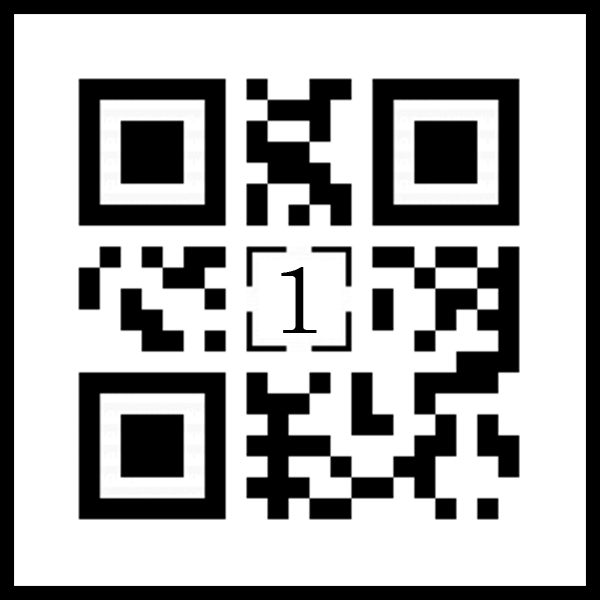
<style>
.page{position:relative;width:600px;height:600px;background:#ffffff}
.page>*{position:absolute;margin:0}
.t1{font:95.2px "Century";color:#000000}
</style>
<div class="page">
<p class="t1" style="left:281px;top:267px;width:36px;height:66px">1</p>
</div>
